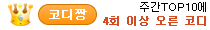
<style>
.page{position:relative;width:210px;height:30px;background:#ffffff}
.page>*{position:absolute;margin:0}
.t1{font:11px/14px "Dotum";color:#d24d24;font-weight:bold}
.t2{font:11px/14px "Dotum";color:#000000}
.t3{font:12px "Dotum";color:#ffffff;font-weight:bold}
</style>
<div class="page">
<p class="t1" style="left:103px;top:2px;width:103px;height:24px;text-align:right"><span class="t2">주간TOP10에<br></span>4회 이상 오른 코디</p>
<p class="t3" style="left:49px;top:9px;width:38px;height:11px">코디짱</p>
</div>
